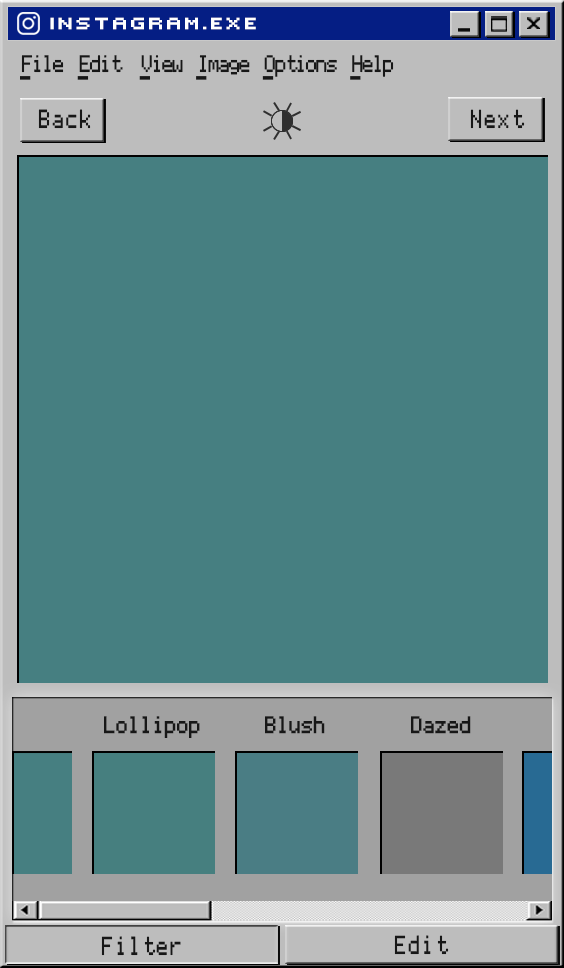
<style>
.page{position:relative;width:564px;height:968px;background:#467f81}
.page>*{position:absolute;margin:0}
.t1{font:23.7px "Victor'sPixelFont";color:#ffffff;font-weight:bold;scale:1.1 1}
.t2{font:19.3px "Apple";letter-spacing:-0.36em;color:#171717;scale:0.84 1}
.t3{font:19.3px "Apple";letter-spacing:-0.36em;color:#171717;text-decoration:underline;scale:0.84 1}
.t4{font:20.9px "Apple";letter-spacing:-0.15em;color:#171717;scale:0.77 1}
.t5{font:19.3px "Apple";letter-spacing:-0.27em;color:#171717;font-weight:bold;scale:0.83 1}
</style>
<div class="page">
<p class="t1" style="left:50px;top:17px;width:206px;height:13px">Instagram.exe</p>
<p class="t2" style="left:20px;top:55px;width:374px;height:25px"><span class="t3">F</span>ile     <span class="t3">E</span>dit     <span class="t3">V</span>iew    <span class="t3">I</span>mage    <span class="t3">O</span>ptions    <span class="t3">H</span>elp</p>
<p class="t4" style="left:38px;top:109px;width:53px;height:20px">Back</p>
<p class="t4" style="left:470px;top:109px;width:55px;height:20px">Next</p>
<p class="t5" style="left:104px;top:716px;width:96px;height:22px">Lollipop</p>
<p class="t5" style="left:265px;top:716px;width:60px;height:18px">Blush</p>
<p class="t5" style="left:411px;top:716px;width:60px;height:18px">Dazed</p>
<p class="t4" style="left:101px;top:936px;width:80px;height:20px">Filter</p>
<p class="t4" style="left:394px;top:935px;width:55px;height:20px">Edit</p>
</div>
